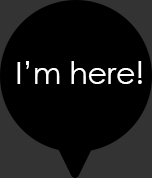
<style>
.page{position:relative;width:152px;height:178px;background:#000000}
.page>*{position:absolute;margin:0}
.t1{font:30px "CenturyGothic";color:#ffffff}
</style>
<div class="page">
<p class="t1" style="left:17px;top:61px;width:125px;height:23px">I’m here!</p>
</div>
